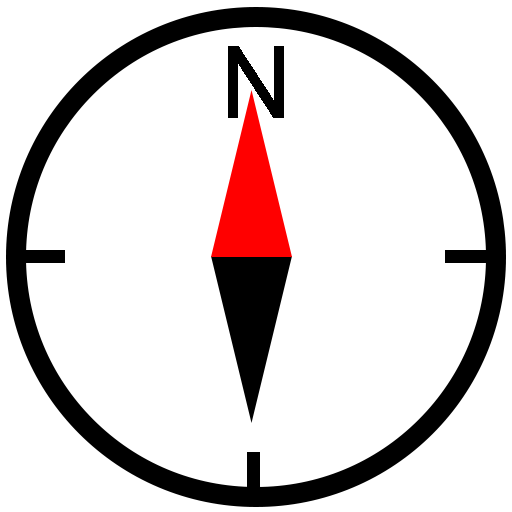
<style>
.page{position:relative;width:512px;height:512px;background:#ffffff}
.page>*{position:absolute;margin:0}
.t1{font:100px "ArialMT";color:#000000}
</style>
<div class="page">
<p class="t1" style="left:228px;top:46px;width:56px;height:72px">N</p>
</div>
